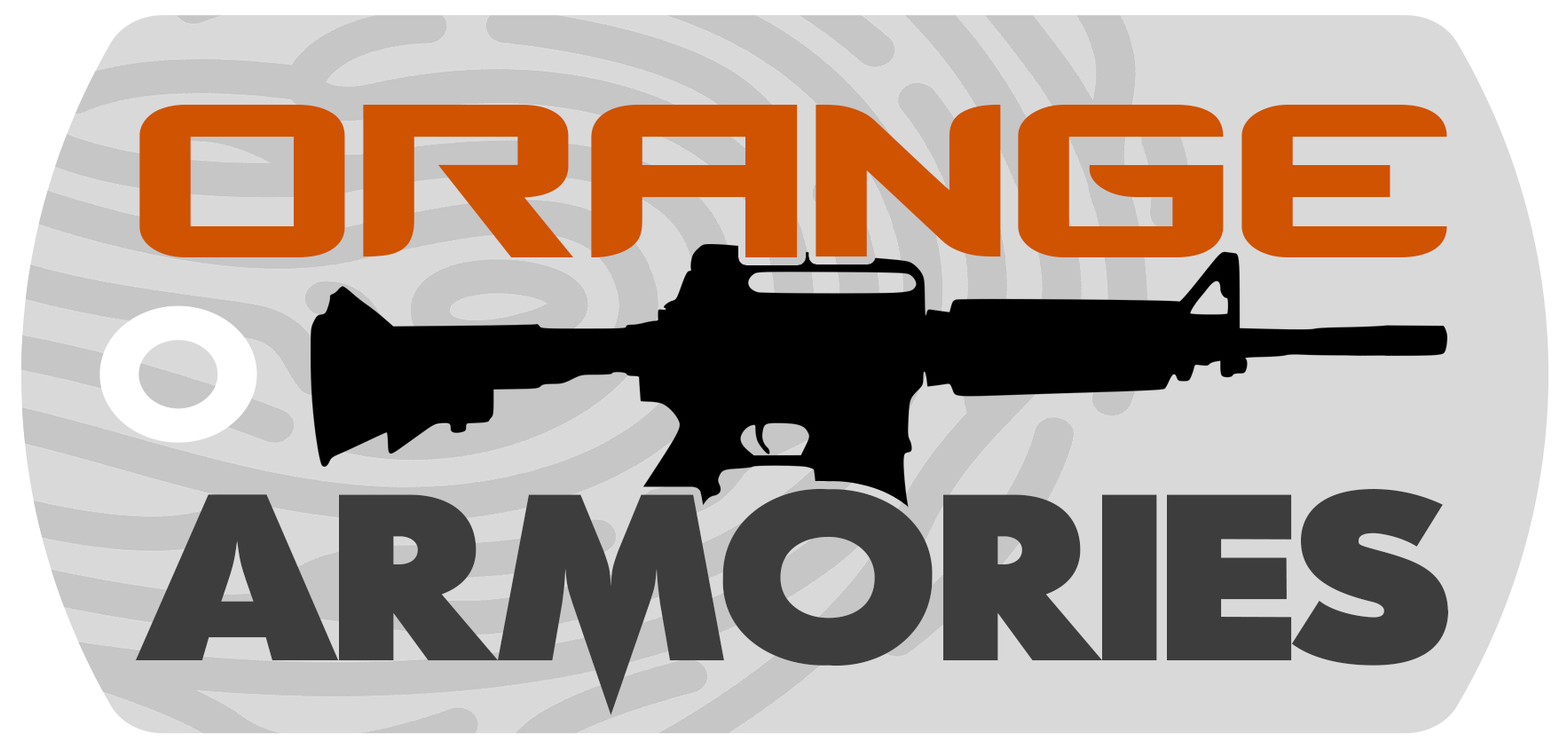
<style>
.page{position:relative;width:1568px;height:749px;background:#d9d9d9}
.page>*{position:absolute;margin:0}
.t1{font:305.3px "Counter-StrikeRegular";color:#cf5300}
.t2{font:229.8px "ScreamReal";color:#3d3d3d}
</style>
<div class="page">
<p class="t1" style="left:139px;top:105px;width:1308px;height:152px">ORANGE</p>
<p class="t2" style="left:136px;top:488px;width:1313px;height:227px">Armories</p>
</div>
